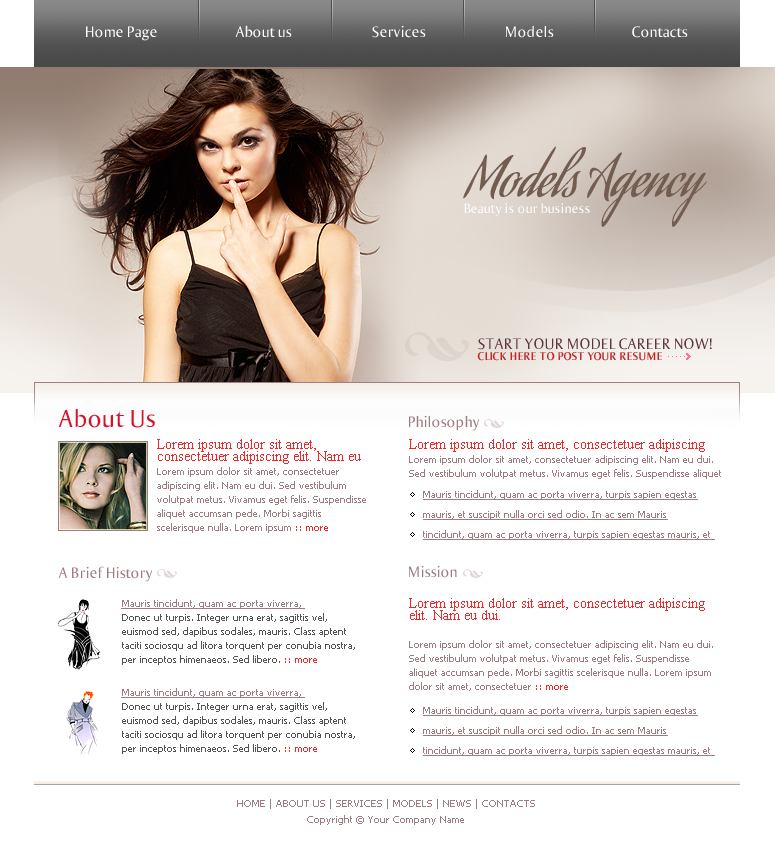
<style>
.page{position:relative;width:775px;height:850px;background:#ffffff}
.page>*{position:absolute;margin:0}
.t1{font:16px "Ogirema";color:#ffffff}
.t2{font:53.3px "AguafinaScript";color:#735d51}
.t3{font:14px "Ogirema";color:#fffdfe}
.t4{font:16px "Ogirema";color:#61353e}
.t5{font:12px "OgiremaBold";color:#bf292a}
.t6{font:26px "Ogirema";color:#d6132a}
.t7{font:16px "Ogirema";color:#9c7c81}
.t8{font:10px/14px "Tahoma";color:#9c7c81}
.t9{font:14px/12px "TimesNewRomanPSMT";color:#ec2828}
.t10{font:10px/14px "Tahoma";color:#ec2828}
.t11{font:10px/20px "Tahoma";color:#9c7c81;text-decoration:underline}
.t12{font:10px/14px "Tahoma";color:#535353}
.t13{font:10px/14px "Tahoma";color:#9c7c81;text-decoration:underline}
.t14{font:10px/16px "Tahoma";color:#9c7c81}
</style>
<div class="page">
<p class="t1" style="left:86px;top:26px;width:71px;height:15px">Home Page</p>
<p class="t1" style="left:235px;top:25px;width:57px;height:13px">About us</p>
<p class="t1" style="left:372px;top:25px;width:54px;height:13px">Services</p>
<p class="t1" style="left:506px;top:25px;width:48px;height:13px">Models</p>
<p class="t1" style="left:632px;top:26px;width:56px;height:12px">Contacts</p>
<p class="t2" style="left:463px;top:146px;width:244px;height:81px">Models Agency</p>
<p class="t3" style="left:464px;top:203px;width:126px;height:13px">Beauty is our business</p>
<p class="t4" style="left:478px;top:338px;width:234px;height:12px">START YOUR MODEL CAREER NOW!</p>
<p class="t5" style="left:477px;top:352px;width:185px;height:9px">CLICK HERE TO POST YOUR RESUME</p>
<p class="t6" style="left:58px;top:408px;width:97px;height:20px">About Us</p>
<p class="t7" style="left:409px;top:415px;width:71px;height:16px">Philosophy</p>
<p class="t8" style="left:157px;top:439px;width:209px;height:94px"><span class="t9">Lorem ipsum dolor sit amet, consectetuer adipiscing elit. Nam eu </span><br>Lorem ipsum dolor sit amet, consectetuer adipiscing elit. Nam eu dui. Sed vestibulum volutpat metus. Vivamus eget felis. Suspendisse aliquet accumsan pede. Morbi sagittis scelerisque nulla. Lorem ipsum <span class="t10">:: more</span></p>
<p class="t8" style="left:409px;top:439px;width:312px;height:40px"><span class="t9">Lorem ipsum dolor sit amet, consectetuer adipiscing </span><br>Lorem ipsum dolor sit amet, consectetuer adipiscing elit. Nam eu dui. Sed vestibulum volutpat metus. Vivamus eget felis. Suspendisse aliquet</p>
<p class="t11" style="left:423px;top:490px;width:292px;height:50px">Mauris tincidunt, quam ac porta viverra, turpis sapien egestas mauris, et suscipit nulla orci sed odio. In ac sem Mauris tincidunt, quam ac porta viverra, turpis sapien egestas mauris, et</p>
<p class="t7" style="left:58px;top:566px;width:95px;height:16px">A Brief History</p>
<p class="t7" style="left:409px;top:565px;width:48px;height:13px">Mission</p>
<p class="t12" style="left:121px;top:599px;width:234px;height:66px"><span class="t13">Mauris tincidunt, quam ac porta viverra, <br></span>Donec ut turpis. Integer urna erat, sagittis vel, euismod sed, dapibus sodales, mauris. Class aptent taciti sociosqu ad litora torquent per conubia nostra, per inceptos himenaeos. Sed libero. <span class="t10">:: more</span></p>
<p class="t8" style="left:409px;top:598px;width:304px;height:93px"><span class="t9">Lorem ipsum dolor sit amet, consectetuer adipiscing elit. Nam eu dui. <br></span><br>Lorem ipsum dolor sit amet, consectetuer adipiscing elit. Nam eu dui. Sed vestibulum volutpat metus. Vivamus eget felis. Suspendisse aliquet accumsan pede. Morbi sagittis scelerisque nulla. Lorem ipsum dolor sit amet, consectetuer<span class="t10"> :: more</span></p>
<p class="t12" style="left:121px;top:688px;width:234px;height:66px"><span class="t13">Mauris tincidunt, quam ac porta viverra, <br></span>Donec ut turpis. Integer urna erat, sagittis vel, euismod sed, dapibus sodales, mauris. Class aptent taciti sociosqu ad litora torquent per conubia nostra, per inceptos himenaeos. Sed libero. <span class="t10">:: more</span></p>
<p class="t11" style="left:423px;top:706px;width:292px;height:50px">Mauris tincidunt, quam ac porta viverra, turpis sapien egestas mauris, et suscipit nulla orci sed odio. In ac sem Mauris tincidunt, quam ac porta viverra, turpis sapien egestas mauris, et</p>
<p class="t14" style="left:237px;top:799px;width:298px;height:26px;text-align:center">HOME | ABOUT US | SERVICES | MODELS | NEWS | CONTACTS<br>Copyright © Your Company Name</p>
</div>
